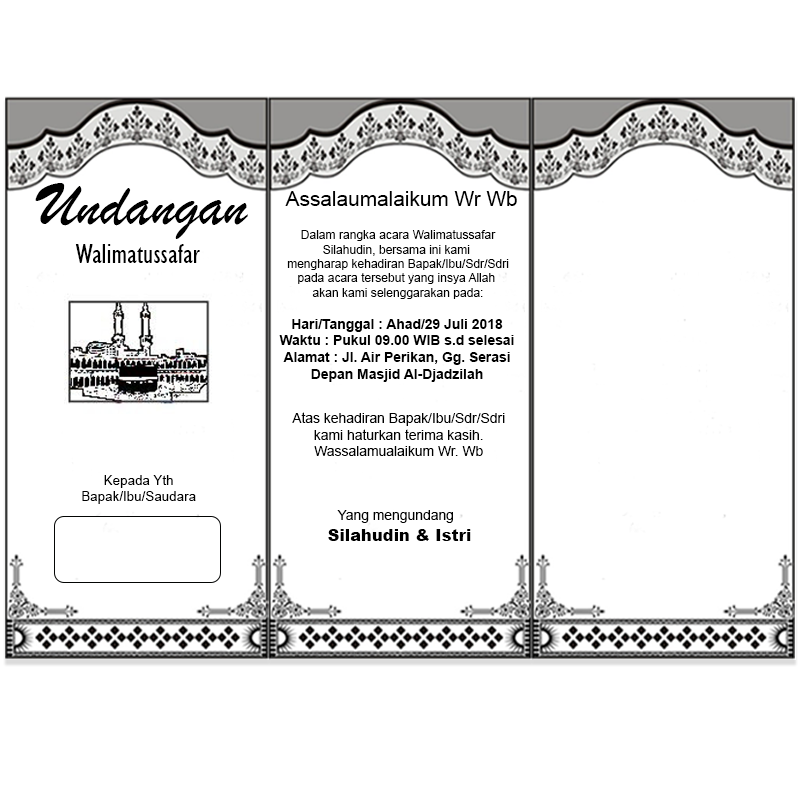
<style>
.page{position:relative;width:800px;height:800px;background:#ffffff}
.page>*{position:absolute;margin:0}
.t1{font:62.9px "BrushScriptMT";color:#000000}
.t2{font:20.8px "ArialMT";color:#000000}
.t3{font:12.1px "ArialMT";color:#000000}
.t4{font:13.9px "GillSansMT-Condensed";color:#000000}
.t5{font:13.9px "Arial-BoldMT";color:#000000}
.t6{font:13.9px "ArialMT";color:#000000}
.t7{font:13.4px "ArialMT";color:#000000}
.t8{font:16.3px "Arial-Black";color:#000000}
</style>
<div class="page">
<p class="t1" style="left:35px;top:183px;width:213px;height:56px">Undangan</p>
<p class="t2" style="left:285px;top:191px;width:232px;height:15px">Assalaumalaikum Wr Wb</p>
<p class="t3" style="left:287px;top:230px;width:222px;height:69px;text-align:center">Dalam rangka acara Walimatussafar<br>Silahudin, bersama ini kami <br>mengharap kehadiran Bapak/Ibu/Sdr/Sdri<br>pada acara tersebut yang insya Allah <br>akan kami selenggarakan pada:</p>
<p class="t4" style="left:75px;top:244px;width:125px;height:19px">Walimatussafar</p>
<p class="t5" style="left:279px;top:319px;width:235px;height:63px;text-align:center">Hari/Tanggal : Ahad/29 Juli 2018<br>Waktu : Pukul 09.00 WIB s.d selesai<br>Alamat : Jl. Air Perikan, Gg. Serasi<br>Depan Masjid Al-Djadzilah</p>
<p class="t6" style="left:292px;top:412px;width:213px;height:44px;text-align:center">Atas kehadiran Bapak/Ibu/Sdr/Sdri<br>kami haturkan terima kasih.<br>Wassalamualaikum Wr. Wb</p>
<p class="t7" style="left:82px;top:475px;width:114px;height:29px;text-align:center">Kepada Yth<br>Bapak/Ibu/Saudara</p>
<p class="t6" style="left:337px;top:510px;width:116px;height:13px">Yang mengundang</p>
<p class="t8" style="left:328px;top:529px;width:143px;height:12px">Silahudin &amp; Istri</p>
</div>
